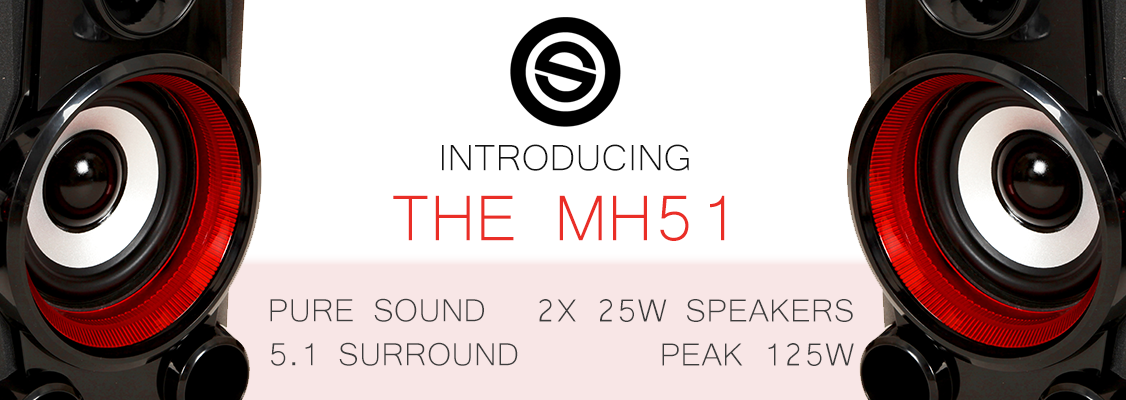
<style>
.page{position:relative;width:1126px;height:400px;background:#ffffff}
.page>*{position:absolute;margin:0}
.t1{font:47.4px "Microsoft-Yi-Baiti";color:#141414;text-transform:uppercase}
.t2{font:83.4px "Microsoft-Yi-Baiti";color:#ea2e27;text-transform:uppercase}
.t3{font:41.4px/44px "Microsoft-Yi-Baiti";color:#3d3d3d;text-transform:uppercase}
</style>
<div class="page">
<p class="t1" style="left:442px;top:144px;width:247px;height:27px">Introducing</p>
<p class="t2" style="left:393px;top:195px;width:332px;height:46px">The MH51</p>
<p class="t3" style="left:270px;top:298px;width:248px;height:68px">Pure Sound<br>5.1 Surround</p>
<p class="t3" style="left:539px;top:299px;width:315px;height:67px;text-align:right">2x 25W Speakers<br>Peak 125W</p>
</div>
